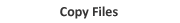
<style>
.page{position:relative;width:180px;height:23px;background:#ffffff}
.page>*{position:absolute;margin:0}
.t1{font:14px "Calibri-Bold";color:#363535}
</style>
<div class="page">
<p class="t1" style="left:60px;top:6px;width:58px;height:13px">Copy Files</p>
</div>
